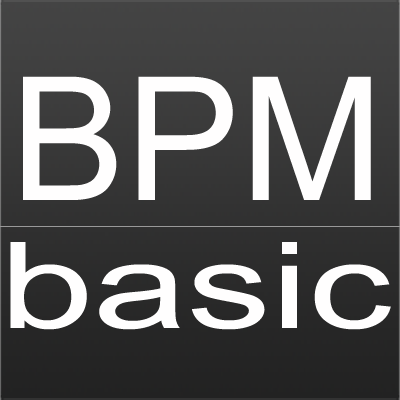
<style>
.page{position:relative;width:400px;height:400px}
.page>*{position:absolute;margin:0}
.t1{font:172px "ArialMT";color:#fffefe}
.t2{font:120px "ArialMT";color:#fffefe;scale:1.4 1}
</style>
<div class="page">
<p class="t1" style="left:23px;top:76px;width:348px;height:124px">BPM</p>
<p class="t2" style="left:10px;top:242px;width:381px;height:88px">basic</p>
</div>
